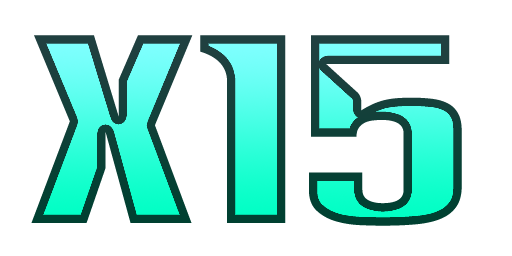
<style>
.page{position:relative;width:512px;height:256px;background:#ffffff}
.page>*{position:absolute;margin:0}
.t1{font:256px "Anklepants-Regular"}
</style>
<div class="page">
<p class="t1" style="left:31px;top:35px;width:431px;height:191px">x15</p>
</div>
